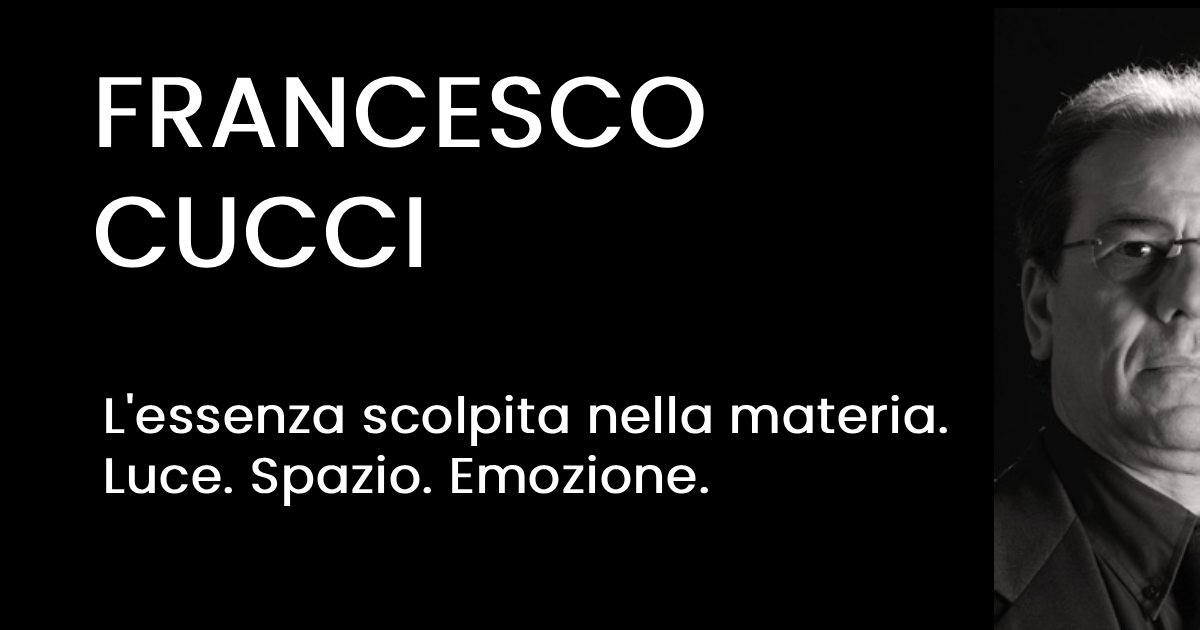
<style>
.page{position:relative;width:1200px;height:630px;background:#000000}
.page>*{position:absolute;margin:0}
.t1{font:100px "Poppins-Regular";color:#ffffff;font-weight:bold}
.t2{font:50px "Poppins-Regular";color:#ffffff;font-weight:bold}
</style>
<div class="page">
<p class="t1" style="left:95px;top:76px;width:609px;height:192px">FRANCESCO <br>CUCCI</p>
<p class="t2" style="left:106px;top:393px;width:841px;height:113px">L'essenza scolpita nella materia.<br>Luce. Spazio. Emozione.</p>
</div>
